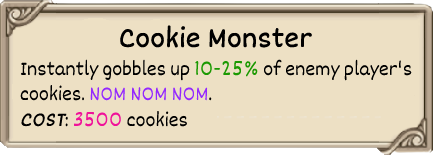
<style>
.page{position:relative;width:433px;height:155px;background:#ede0c4}
.page>*{position:absolute;margin:0}
.t1{font:30px "Dekko";color:#000000;font-weight:bold}
.t2{font:21px "Dekko";color:#000000}
.t3{font:21px "Dekko";color:#1b9902}
.t4{font:21px "Dekko";color:#9428ff}
.t5{font:21px "Dekko";color:#000000;font-weight:bold;font-style:italic}
.t6{font:21px "Dekko";color:#f0129a}
</style>
<div class="page">
<p class="t1" style="left:120px;top:25px;width:192px;height:23px">Cookie Monster</p>
<p class="t2" style="left:20px;top:59px;width:392px;height:68px">Instantly gobbles up <span class="t3">10-25% </span>of enemy player's<br>cookies. <span class="t4">NOM NOM NOM</span>.<br><span class="t5">COST</span>: <span class="t6">3500 </span>cookies</p>
</div>
